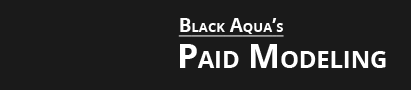
<style>
.page{position:relative;width:411px;height:90px;background:#1a1a1a}
.page>*{position:absolute;margin:0}
.t1{font:18.8px "OpenSans-Bold";color:#ffffff;font-variant:small-caps;text-decoration:underline}
.t2{font:33.7px "OpenSans-Bold";color:#ffffff;font-variant:small-caps}
</style>
<div class="page">
<p class="t1" style="left:178px;top:18px;width:106px;height:19px">Black Aqua’s</p>
<p class="t2" style="left:180px;top:44px;width:206px;height:24px">Paid Modeling</p>
</div>
